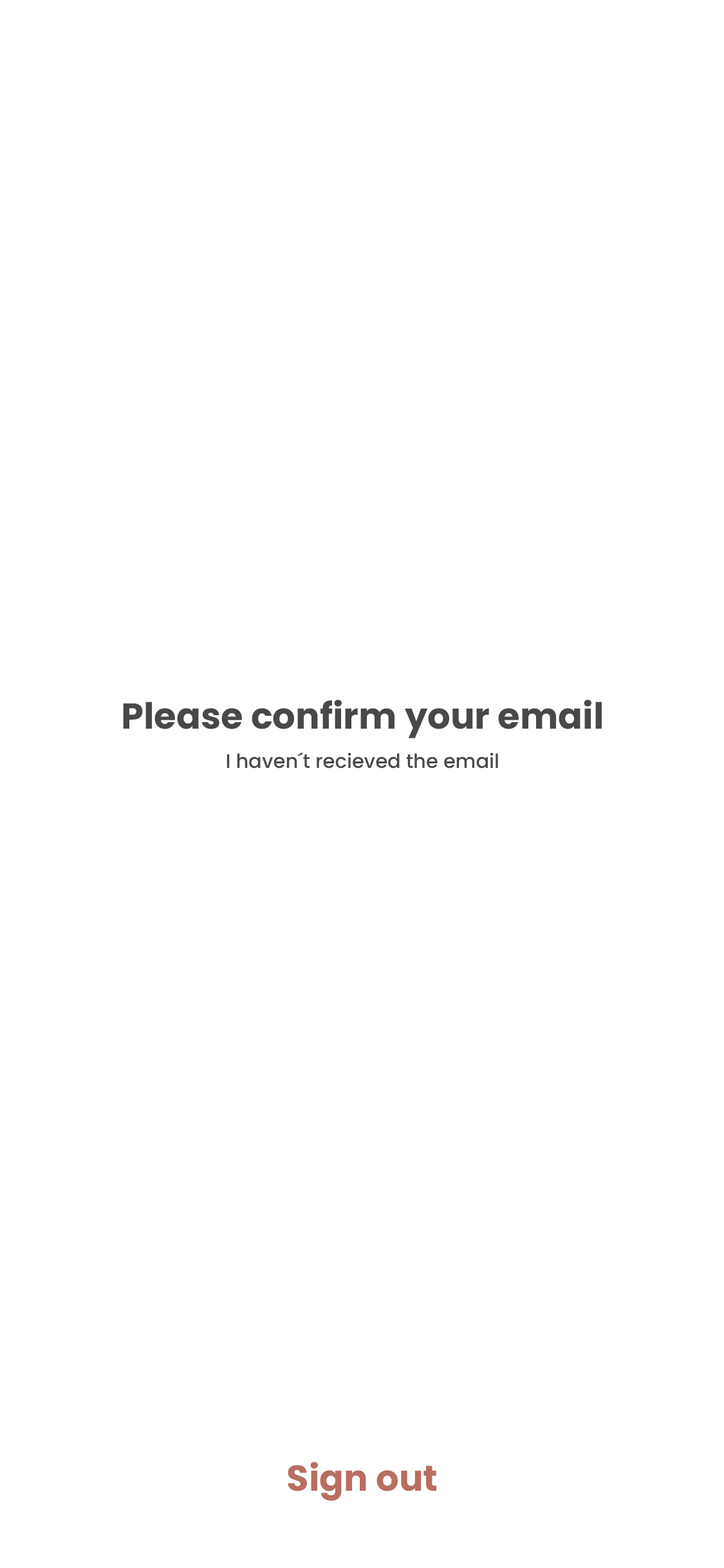
<style>
.page{position:relative;width:724px;height:1568px;background:#ffffff}
.page>*{position:absolute;margin:0}
.t1{font:36px "Poppins-Bold";color:#484848}
.t2{font:19.7px "Poppins-Medium";color:#484848}
.t3{font:36px "Poppins-Bold";color:#b86e61}
</style>
<div class="page">
<p class="t1" style="left:123px;top:700px;width:479px;height:38px">Please confirm your email</p>
<p class="t2" style="left:227px;top:752px;width:271px;height:17px">I haven´t recieved the email</p>
<p class="t3" style="left:288px;top:1462px;width:148px;height:39px">Sign out</p>
</div>
